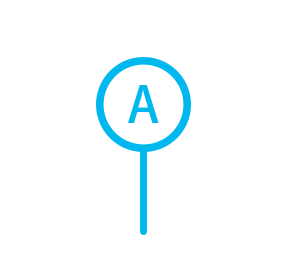
<style>
.page{position:relative;width:286px;height:272px;background:#ffffff}
.page>*{position:absolute;margin:0}
.t1{font:50px "AdobeHeitiStd-Regular";color:#00b7ee}
</style>
<div class="page">
<p class="t1" style="left:128px;top:85px;width:31px;height:38px">A</p>
</div>
